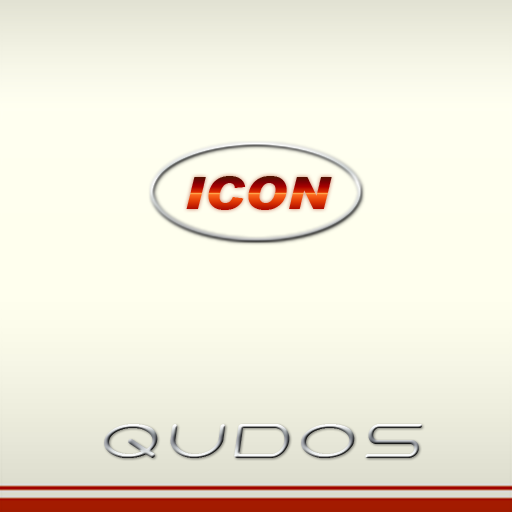
<style>
.page{position:relative;width:512px;height:512px}
.page>*{position:absolute;margin:0}
.t1{font:44.6px "Arial-BlackItalic";font-variant:small-caps;scale:1.15 1}
.t2{font:48px "7daysoblique";font-variant:small-caps}
</style>
<div class="page">
<p class="t1" style="left:186px;top:176px;width:146px;height:34px">ICON</p>
<p class="t2" style="left:104px;top:424px;width:318px;height:34px">QUDOS</p>
</div>
